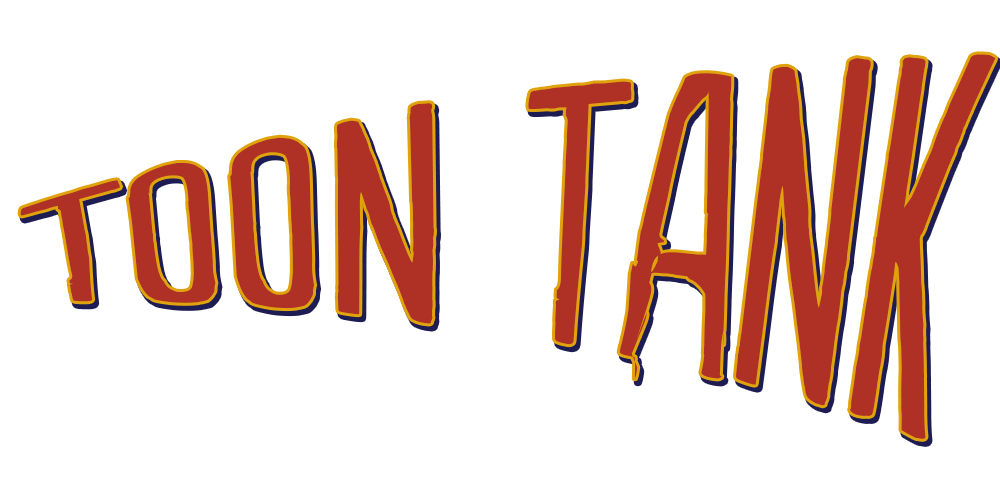
<style>
.page{position:relative;width:1000px;height:500px;background:#ffffff}
.page>*{position:absolute;margin:0}
.t1{font:323.8px "Populaire";color:#af3024}
</style>
<div class="page">
<p class="t1" style="left:20px;top:54px;width:976px;height:385px">TOON TANK</p>
</div>
